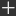
<style>
.page{position:relative;width:16px;height:16px;background:#333333}
.page>*{position:absolute;margin:0}
.t1{font:24px "BirchStd";color:#ebebeb}
</style>
<div class="page">
<p class="t1" style="left:2px;top:1px;width:13px;height:13px">+</p>
</div>
